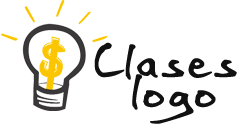
<style>
.page{position:relative;width:250px;height:127px;background:#ffffff}
.page>*{position:absolute;margin:0}
.t1{font:60px/30px "BaileyMF";color:#111111;font-weight:bold}
</style>
<div class="page">
<p class="t1" style="left:94px;top:42px;width:143px;height:82px;text-align:center">Clases <br>logo</p>
</div>
